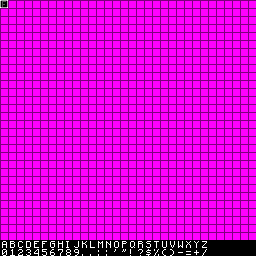
<style>
.page{position:relative;width:256px;height:256px;background:#ff00ff}
.page>*{position:absolute;margin:0}
.t1{font:8px "Minecraftia";color:#ffffff}
</style>
<div class="page">
<p class="t1" style="left:2px;top:241px;width:5px;height:7px">A</p>
<p class="t1" style="left:10px;top:241px;width:5px;height:7px">B</p>
<p class="t1" style="left:18px;top:241px;width:5px;height:7px">C</p>
<p class="t1" style="left:26px;top:241px;width:5px;height:7px">D</p>
<p class="t1" style="left:34px;top:241px;width:5px;height:7px">E</p>
<p class="t1" style="left:42px;top:241px;width:5px;height:7px">F</p>
<p class="t1" style="left:50px;top:241px;width:5px;height:7px">G</p>
<p class="t1" style="left:58px;top:241px;width:5px;height:7px">H</p>
<p class="t1" style="left:66px;top:241px;width:3px;height:7px">I</p>
<p class="t1" style="left:74px;top:241px;width:5px;height:7px">J</p>
<p class="t1" style="left:82px;top:241px;width:5px;height:7px">K</p>
<p class="t1" style="left:90px;top:241px;width:5px;height:7px">L</p>
<p class="t1" style="left:98px;top:241px;width:5px;height:7px">M</p>
<p class="t1" style="left:106px;top:241px;width:5px;height:7px">N</p>
<p class="t1" style="left:114px;top:241px;width:5px;height:7px">O</p>
<p class="t1" style="left:122px;top:241px;width:5px;height:7px">P</p>
<p class="t1" style="left:130px;top:241px;width:5px;height:7px">Q</p>
<p class="t1" style="left:138px;top:241px;width:5px;height:7px">R</p>
<p class="t1" style="left:146px;top:241px;width:5px;height:7px">S</p>
<p class="t1" style="left:154px;top:241px;width:5px;height:7px">T</p>
<p class="t1" style="left:162px;top:241px;width:5px;height:7px">U</p>
<p class="t1" style="left:170px;top:241px;width:5px;height:7px">V</p>
<p class="t1" style="left:178px;top:241px;width:5px;height:7px">W</p>
<p class="t1" style="left:186px;top:241px;width:5px;height:7px">X</p>
<p class="t1" style="left:194px;top:241px;width:5px;height:7px">Y</p>
<p class="t1" style="left:202px;top:241px;width:5px;height:7px">Z</p>
<p class="t1" style="left:2px;top:249px;width:5px;height:7px">0</p>
<p class="t1" style="left:10px;top:249px;width:5px;height:7px">1</p>
<p class="t1" style="left:18px;top:249px;width:5px;height:7px">2</p>
<p class="t1" style="left:26px;top:249px;width:5px;height:7px">3</p>
<p class="t1" style="left:34px;top:249px;width:5px;height:7px">4</p>
<p class="t1" style="left:42px;top:249px;width:5px;height:7px">5</p>
<p class="t1" style="left:50px;top:249px;width:5px;height:7px">6</p>
<p class="t1" style="left:58px;top:249px;width:5px;height:7px">7</p>
<p class="t1" style="left:66px;top:249px;width:5px;height:7px">8</p>
<p class="t1" style="left:74px;top:249px;width:5px;height:7px">9</p>
<p class="t1" style="left:98px;top:250px;width:1px;height:6px">:</p>
<p class="t1" style="left:106px;top:250px;width:1px;height:7px">;</p>
<p class="t1" style="left:114px;top:249px;width:2px;height:3px">‘</p>
<p class="t1" style="left:122px;top:249px;width:4px;height:3px">“</p>
<p class="t1" style="left:130px;top:249px;width:1px;height:7px">!</p>
<p class="t1" style="left:138px;top:249px;width:5px;height:7px">?</p>
<p class="t1" style="left:146px;top:249px;width:5px;height:7px">$</p>
<p class="t1" style="left:154px;top:249px;width:5px;height:7px">%</p>
<p class="t1" style="left:162px;top:249px;width:4px;height:7px">(</p>
<p class="t1" style="left:170px;top:249px;width:4px;height:7px">)</p>
<p class="t1" style="left:186px;top:251px;width:5px;height:4px">=</p>
<p class="t1" style="left:194px;top:250px;width:5px;height:5px">+</p>
<p class="t1" style="left:202px;top:249px;width:5px;height:7px">/</p>
</div>
